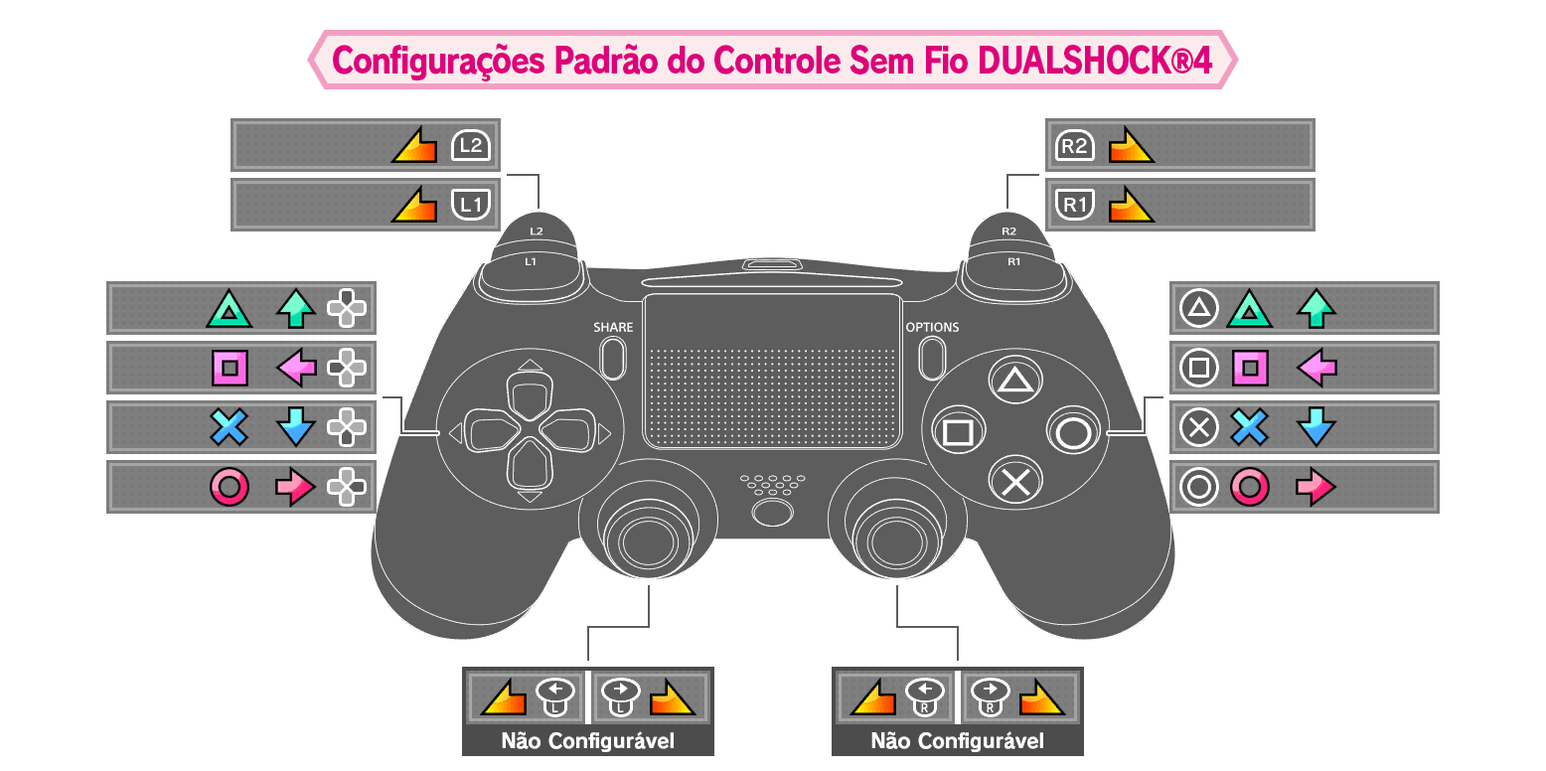
<style>
.page{position:relative;width:1546px;height:771px;background:#ffffff}
.page>*{position:absolute;margin:0}
.t1{font:35.8px "RodinPro-EB";letter-spacing:-0.048em;color:#de007b;scale:0.85 1}
.t2{font:19.9px "RodinPro-B";letter-spacing:-0.002em;color:#ffffff}
</style>
<div class="page">
<p class="t1" style="left:333px;top:43px;width:880px;height:38px">Configurações Padrão do Controle Sem Fio DUALSHOCK®4</p>
<p class="t2" style="left:502px;top:731px;width:172px;height:21px">Não Configurável</p>
<p class="t2" style="left:872px;top:731px;width:171px;height:21px">Não Configurável</p>
</div>
